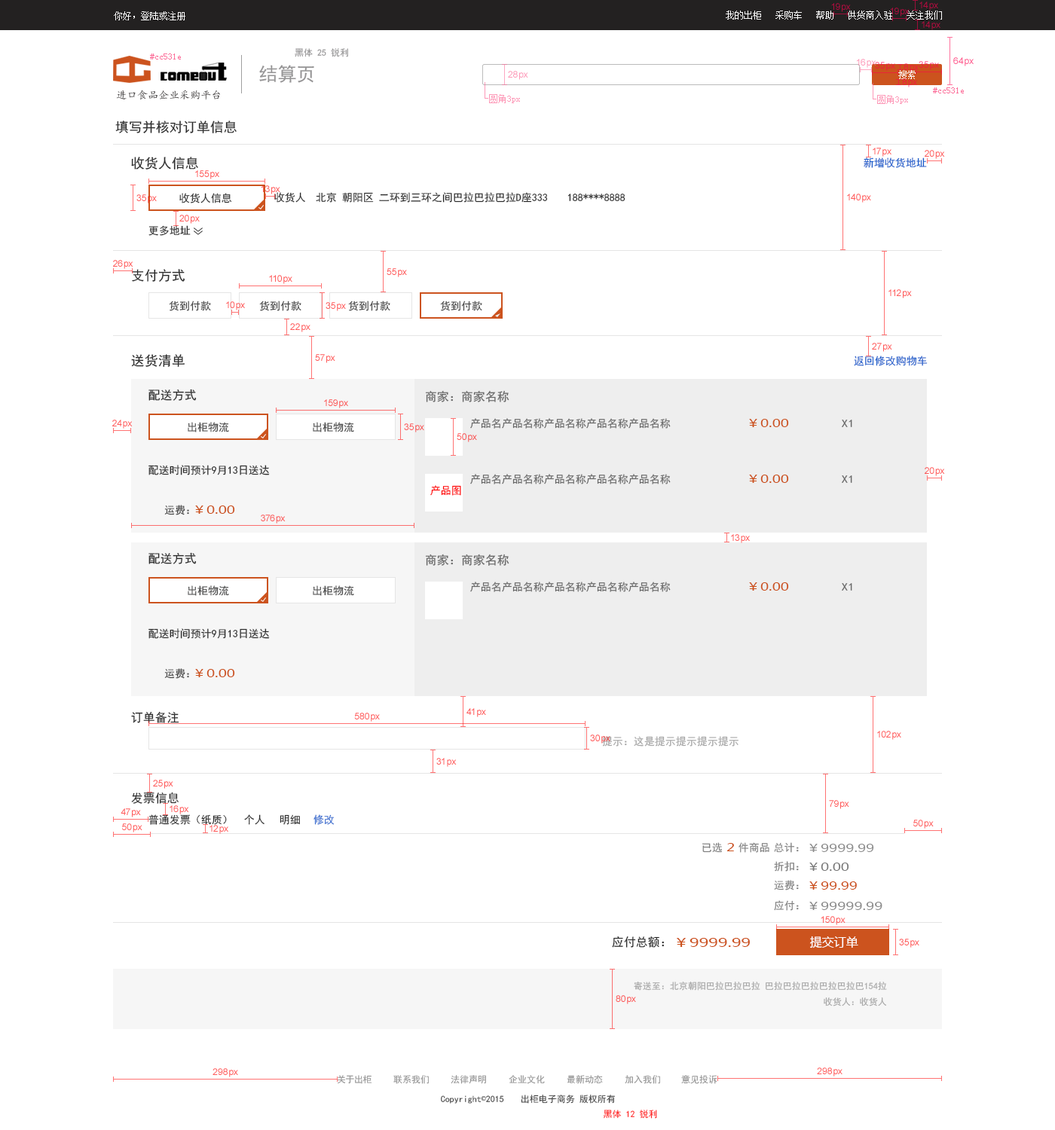
<style>
.page{position:relative;width:1055px;height:1130px;background:#ffffff}
.page>*{position:absolute;margin:0}
.t1{font:9px "SimSun";color:#ffffff}
.t2{font:9px "SimSun";color:#fc6f9a}
.t3{font:9px "SimHei";color:#959495}
.t4{font:18.8px "SimHei";color:#959495}
.t5{font:10.5px "¿¬Ìå";color:#464343}
.t6{font:13.6px "SimHei";color:#2b2b2b}
.t7{font:10.5px "SimHei";color:#1e60cc}
.t8{font:10.5px "SimHei";color:#2b2b2b}
.t9{font:10.5px "SimHei";color:#454545}
.t10{font:12.1px "SimHei";color:#2b2b2b}
.t11{font:12.1px "SimHei";color:#676767}
.t12{font:10.5px "SimHei";color:#676767}
.t13{font:10.5px "MicrosoftYaHei";color:#cc531e;scale:1.35 1}
.t14{font:10.5px "SimHei";color:#676767;scale:1.19 1}
.t15{font:10.5px "SimHei";color:#ff0000}
.t16{font:10.5px "SimHei";color:#a7a7a7}
.t17{font:10.5px "SimHei";color:#356ccf}
.t18{font:10.5px "SimHei";color:#818181}
.t19{font:10.5px "MicrosoftYaHei";color:#8e8e8e;scale:1.35 1}
.t20{font:10.5px "MicrosoftYaHei";color:#7c7b7b;scale:1.35 1}
.t21{font:10.5px "MicrosoftYaHei";color:#8b8b8b;scale:1.35 1}
.t22{font:12.1px "MicrosoftYaHei";color:#cc531e;scale:1.35 1}
.t23{font:12.1px "MicrosoftYaHei";color:#ffffff}
.t24{font:9px "SimHei";color:#a7a7a7}
.t25{font:9px "SimHei";color:#959595}
.t26{font:9px "SimHei";color:#434343}
.t27{font:9px "SimSun";color:#434343}
.t28{font:9px "SimHei";color:#ff2222}
</style>
<div class="page">
<p class="t1" style="left:114px;top:11px;width:71px;height:9px">你好，登陆或注册</p>
<p class="t1" style="left:726px;top:11px;width:216px;height:9px">我的出柜   采购车   帮助   供货商入驻   关注我们</p>
<p class="t2" style="left:150px;top:54px;width:31px;height:6px">#cc531e</p>
<p class="t3" style="left:295px;top:48px;width:53px;height:9px">黑体 25 锐利</p>
<p class="t4" style="left:259px;top:65px;width:55px;height:18px">结算页</p>
<p class="t1" style="left:898px;top:70px;width:18px;height:9px">搜索</p>
<p class="t5" style="left:116px;top:90px;width:104px;height:10px">进口食品企业采购平台</p>
<p class="t2" style="left:933px;top:87px;width:31px;height:6px">#cc531e</p>
<p class="t6" style="left:115px;top:121px;width:122px;height:12px">填写并核对订单信息</p>
<p class="t6" style="left:131px;top:157px;width:67px;height:13px">收货人信息</p>
<p class="t7" style="left:864px;top:157px;width:63px;height:11px">新增收货地址</p>
<p class="t8" style="left:179px;top:193px;width:53px;height:10px">收货人信息</p>
<p class="t8" style="left:274px;top:192px;width:31px;height:11px">收货人</p>
<p class="t8" style="left:316px;top:192px;width:232px;height:11px">北京 朝阳区 二环到三环之间巴拉巴拉巴拉D座333</p>
<p class="t8" style="left:567px;top:194px;width:58px;height:7px">188****8888</p>
<p class="t8" style="left:148px;top:225px;width:43px;height:11px">更多地址</p>
<p class="t6" style="left:132px;top:269px;width:53px;height:13px">支付方式</p>
<p class="t9" style="left:169px;top:301px;width:42px;height:10px">货到付款</p>
<p class="t9" style="left:259px;top:301px;width:42px;height:10px">货到付款</p>
<p class="t9" style="left:348px;top:301px;width:42px;height:10px">货到付款</p>
<p class="t9" style="left:440px;top:301px;width:42px;height:10px">货到付款</p>
<p class="t6" style="left:131px;top:354px;width:54px;height:13px">送货清单</p>
<p class="t7" style="left:854px;top:356px;width:74px;height:10px">返回修改购物车</p>
<p class="t10" style="left:148px;top:389px;width:49px;height:12px">配送方式</p>
<p class="t11" style="left:425px;top:390px;width:84px;height:12px">商家：商家名称</p>
<p class="t9" style="left:188px;top:422px;width:41px;height:11px">出柜物流</p>
<p class="t9" style="left:313px;top:422px;width:41px;height:11px">出柜物流</p>
<p class="t12" style="left:470px;top:418px;width:201px;height:11px">产品名产品名称产品名称产品名称产品名称</p>
<p class="t13" style="left:749px;top:419px;width:40px;height:8px">￥0.00</p>
<p class="t14" style="left:842px;top:420px;width:10px;height:7px">X1</p>
<p class="t8" style="left:148px;top:465px;width:122px;height:10px">配送时间预计9月13日送达</p>
<p class="t12" style="left:470px;top:474px;width:201px;height:11px">产品名产品名称产品名称产品名称产品名称</p>
<p class="t15" style="left:430px;top:485px;width:31px;height:11px">产品图</p>
<p class="t13" style="left:749px;top:475px;width:40px;height:8px">￥0.00</p>
<p class="t14" style="left:842px;top:475px;width:10px;height:8px">X1</p>
<p class="t9" style="left:164px;top:505px;width:25px;height:10px">运费：</p>
<p class="t13" style="left:195px;top:506px;width:40px;height:8px">￥0.00</p>
<p class="t10" style="left:148px;top:552px;width:49px;height:12px">配送方式</p>
<p class="t11" style="left:425px;top:554px;width:84px;height:12px">商家：商家名称</p>
<p class="t12" style="left:470px;top:582px;width:201px;height:10px">产品名产品名称产品名称产品名称产品名称</p>
<p class="t9" style="left:188px;top:586px;width:41px;height:10px">出柜物流</p>
<p class="t9" style="left:313px;top:586px;width:41px;height:10px">出柜物流</p>
<p class="t13" style="left:749px;top:582px;width:40px;height:9px">￥0.00</p>
<p class="t14" style="left:842px;top:583px;width:10px;height:8px">X1</p>
<p class="t8" style="left:148px;top:628px;width:122px;height:11px">配送时间预计9月13日送达</p>
<p class="t9" style="left:164px;top:668px;width:25px;height:11px">运费：</p>
<p class="t13" style="left:195px;top:669px;width:40px;height:8px">￥0.00</p>
<p class="t10" style="left:131px;top:711px;width:48px;height:12px">订单备注</p>
<p class="t16" style="left:602px;top:736px;width:136px;height:11px">提示：这是提示提示提示提示</p>
<p class="t10" style="left:131px;top:792px;width:48px;height:12px">发票信息</p>
<p class="t8" style="left:148px;top:815px;width:79px;height:10px">普通发票（纸质）</p>
<p class="t8" style="left:244px;top:815px;width:20px;height:10px">个人</p>
<p class="t8" style="left:280px;top:815px;width:20px;height:10px">明细</p>
<p class="t17" style="left:313px;top:815px;width:22px;height:10px">修改</p>
<p class="t18" style="left:702px;top:842px;width:67px;height:11px">已选   件商品</p>
<p class="t13" style="left:726px;top:843px;width:8px;height:9px">2</p>
<p class="t18" style="left:774px;top:842px;width:25px;height:11px">总计：</p>
<p class="t19" style="left:809px;top:844px;width:65px;height:8px">￥9999.99</p>
<p class="t18" style="left:774px;top:861px;width:25px;height:11px">折扣：</p>
<p class="t20" style="left:809px;top:863px;width:40px;height:8px">￥0.00</p>
<p class="t18" style="left:774px;top:880px;width:25px;height:11px">运费：</p>
<p class="t13" style="left:809px;top:882px;width:48px;height:8px">￥99.99</p>
<p class="t18" style="left:774px;top:900px;width:25px;height:11px">应付：</p>
<p class="t21" style="left:809px;top:902px;width:73px;height:8px">￥99999.99</p>
<p class="t10" style="left:612px;top:936px;width:52px;height:12px">应付总额：</p>
<p class="t22" style="left:677px;top:938px;width:73px;height:9px">￥9999.99</p>
<p class="t23" style="left:810px;top:936px;width:48px;height:13px">提交订单</p>
<p class="t24" style="left:634px;top:982px;width:253px;height:9px">寄送至：北京朝阳巴拉巴拉巴拉 巴拉巴拉巴拉巴拉巴拉巴154拉</p>
<p class="t24" style="left:824px;top:998px;width:62px;height:9px">收货人：收货人</p>
<p class="t25" style="left:337px;top:1075px;width:35px;height:9px">关于出柜</p>
<p class="t25" style="left:393px;top:1075px;width:36px;height:9px">联系我们</p>
<p class="t25" style="left:451px;top:1075px;width:35px;height:9px">法律声明</p>
<p class="t25" style="left:509px;top:1075px;width:36px;height:9px">企业文化</p>
<p class="t25" style="left:567px;top:1075px;width:36px;height:9px">最新动态</p>
<p class="t25" style="left:625px;top:1075px;width:35px;height:9px">加入我们</p>
<p class="t25" style="left:681px;top:1075px;width:36px;height:9px">意见投诉</p>
<p class="t26" style="left:441px;top:1096px;width:63px;height:8px">Copyright<span class="t27">©</span>2015</p>
<p class="t26" style="left:521px;top:1095px;width:54px;height:9px">出柜电子商务</p>
<p class="t26" style="left:579px;top:1095px;width:36px;height:9px">版权所有</p>
<p class="t28" style="left:603px;top:1110px;width:54px;height:9px">黑体 12 锐利</p>
</div>
